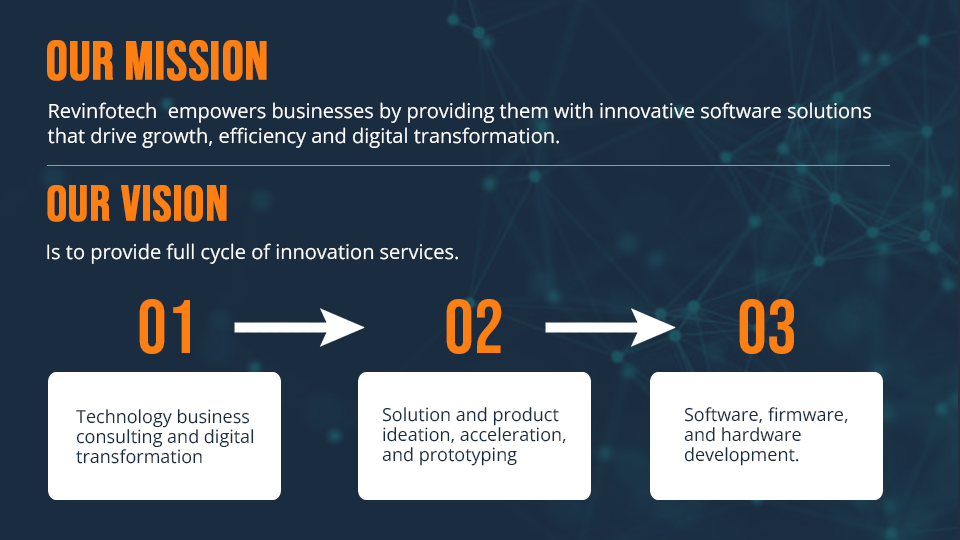
<style>
.page{position:relative;width:960px;height:540px;background:#1a2c40}
.page>*{position:absolute;margin:0}
.t1{font:54px "BebasNeue-Regular";color:#fb7f12;font-weight:bold}
.t2{font:20px/25px "OpenSans-Regular";color:#ffffff}
.t3{font:50px "BebasNeue-Regular";color:#fb7f12;font-weight:bold}
.t4{font:20px "OpenSans-Regular";color:#ffffff}
.t5{font:75px "BebasNeue-Regular";color:#fb7f12}
.t6{font:18px/20px "OpenSans-Regular";color:#1a2c40}
</style>
<div class="page">
<p class="t1" style="left:47px;top:40px;width:220px;height:41px">Our Mission</p>
<p class="t2" style="left:47px;top:102px;width:824px;height:46px">Revinfotech  empowers businesses by providing them with innovative software solutions <br>that drive growth, efficiency and digital transformation.</p>
<p class="t3" style="left:47px;top:185px;width:180px;height:37px">Our vision</p>
<p class="t4" style="left:47px;top:243px;width:411px;height:21px">Is to provide full cycle of innovation services.</p>
<p class="t5" style="left:139px;top:299px;width:51px;height:55px">01</p>
<p class="t5" style="left:446px;top:299px;width:56px;height:55px">02</p>
<p class="t5" style="left:739px;top:299px;width:55px;height:55px">03</p>
<p class="t6" style="left:76px;top:409px;width:178px;height:55px">Technology business <br>consulting and digital <br>transformation</p>
<p class="t6" style="left:382px;top:407px;width:184px;height:59px">Solution and product<br>ideation, acceleration, <br>and prototyping</p>
<p class="t6" style="left:684px;top:407px;width:164px;height:59px">Software, firmware,<br>and hardware<br>development.</p>
</div>
